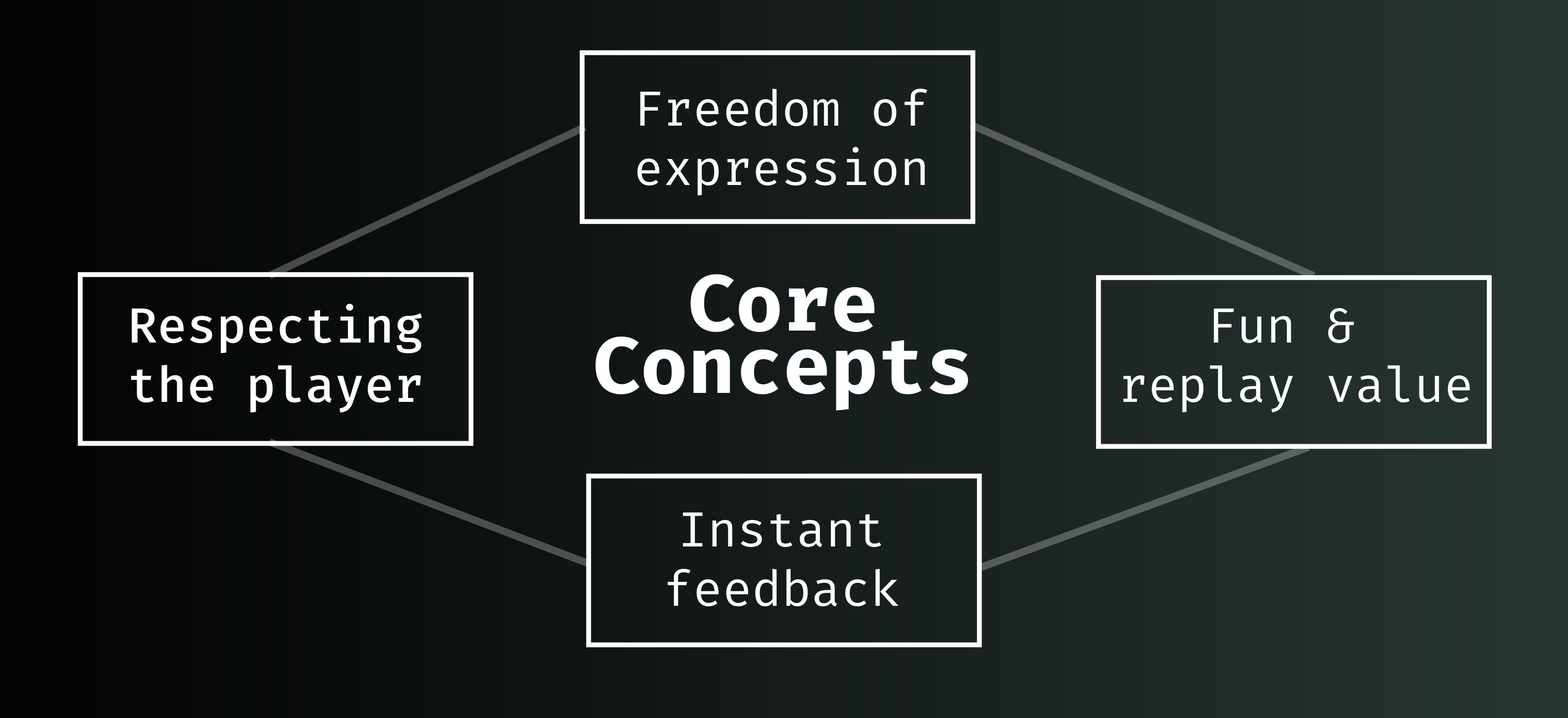
<style>
.page{position:relative;width:1568px;height:718px}
.page>*{position:absolute;margin:0}
.t1{font:49.3px "FiraMono-Regular";color:#ffffff}
.t2{font:79.2px/62.3px "FiraMono-Bold";color:#ffffff}
.t3{font:49.3px "FiraMono-Medium";color:#ffffff}
</style>
<div class="page">
<p class="t1" style="left:637px;top:88px;width:291px;height:107px;text-align:center">Freedom of<br>expression</p>
<p class="t2" style="left:595px;top:274px;width:373px;height:137px;text-align:center">Core<br>Concepts</p>
<p class="t3" style="left:131px;top:304px;width:291px;height:109px;text-align:center">Respecting<br>the player</p>
<p class="t1" style="left:1123px;top:308px;width:347px;height:104px;text-align:center">Fun &amp; <br>replay value</p>
<p class="t1" style="left:667px;top:512px;width:232px;height:95px;text-align:center">Instant<br>feedback</p>
</div>
